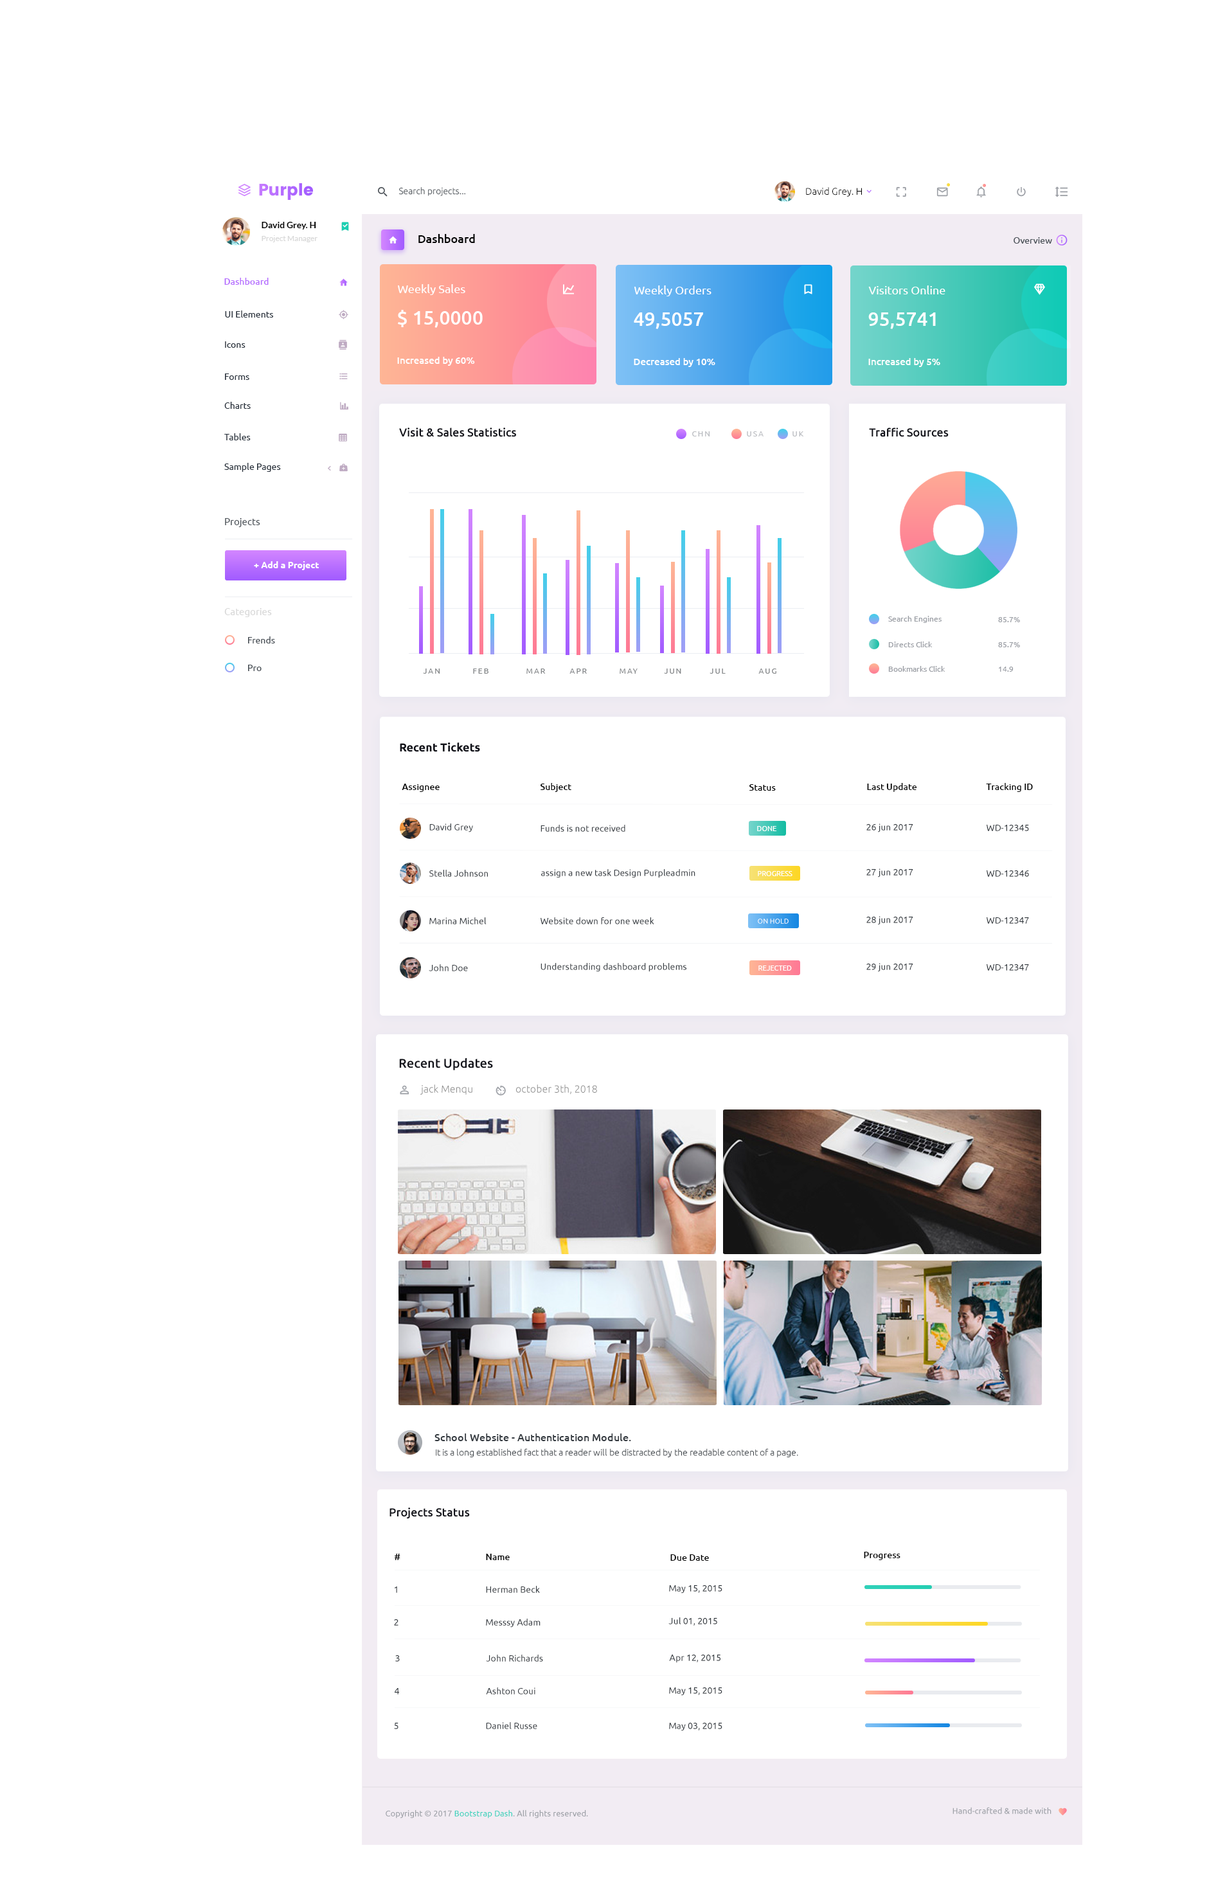
<style>
.page{position:relative;width:1207px;height:1895px;background:#ffffff}
.page>*{position:absolute;margin:0}
.t1{font:9px "Ubuntu-Light";color:#495057}
.t2{font:9.6px "Ubuntu-Light";color:#000000}
.t3{font:9px "Lato-Bold";color:#000000}
.t4{font:11.6px "Ubuntu-Medium";color:#000000}
.t5{font:9px "Ubuntu-Regular";color:#495057}
.t6{font:9px "Ubuntu-Medium";color:#b66dff}
.t7{font:11.6px "Ubuntu-Regular";color:#ffffff}
.t8{font:9px "Ubuntu-Regular";color:#29323d}
.t9{font:19.3px "Ubuntu-Medium";color:#ffffff}
.t10{font:9.6px "Ubuntu-Medium";color:#ffffff}
.t11{font:11.6px "Ubuntu-Medium";color:#12131a}
.t12{font:7.7px "Ubuntu-Regular";letter-spacing:0.16em;color:#9c9fa6;text-transform:uppercase}
.t13{font:9.6px "Ubuntu-Regular";color:#495057}
.t14{font:9px "Ubuntu-Bold";color:#ffffff}
.t15{font:7.7px "Ubuntu-Regular";color:#9c9fa6}
.t16{font:11.6px "Ubuntu-Bold";color:#12131a}
.t17{font:9px "Ubuntu-Medium";color:#000000}
.t18{font:9px "Ubuntu-Regular";color:#343a40}
.t19{font:7.1px "Ubuntu-Regular";color:#ffffff;text-transform:uppercase}
.t20{font:12.9px "Ubuntu-Medium";color:#12131a}
.t21{font:10.3px "Ubuntu-Light";color:#9c9fa6}
.t22{font:10.3px "Ubuntu-Medium";color:#343a40}
.t23{font:9px "Ubuntu-Light";color:#343a40}
.t24{font:8.4px "Ubuntu-Regular";color:#9c9fa6}
.t25{font:8.4px "Ubuntu-Regular";color:#32d2bb}
</style>
<div class="page">
<p class="t1" style="left:399px;top:187px;width:67px;height:9px">Search projects...</p>
<p class="t2" style="left:806px;top:187px;width:56px;height:10px">David Grey. H</p>
<p class="t3" style="left:262px;top:222px;width:54px;height:8px">David Grey. H</p>
<p class="t4" style="left:419px;top:234px;width:56px;height:9px">Dashboard</p>
<p class="t5" style="left:1014px;top:237px;width:38px;height:7px">Overview</p>
<p class="t6" style="left:224px;top:278px;width:45px;height:7px">Dashboard</p>
<p class="t7" style="left:398px;top:284px;width:67px;height:11px">Weekly Sales</p>
<p class="t7" style="left:634px;top:285px;width:78px;height:11px">Weekly Orders</p>
<p class="t7" style="left:869px;top:285px;width:77px;height:9px">Visitors Online</p>
<p class="t8" style="left:225px;top:310px;width:48px;height:8px">UI Elements</p>
<p class="t9" style="left:398px;top:310px;width:85px;height:18px">$ 15,0000</p>
<p class="t9" style="left:634px;top:312px;width:69px;height:17px">49,5057</p>
<p class="t9" style="left:869px;top:312px;width:67px;height:17px">95,5741</p>
<p class="t8" style="left:225px;top:341px;width:21px;height:7px">Icons</p>
<p class="t10" style="left:397px;top:357px;width:78px;height:9px">Increased by 60%</p>
<p class="t10" style="left:634px;top:358px;width:82px;height:9px">Decreased by 10%</p>
<p class="t10" style="left:869px;top:358px;width:72px;height:9px">Increased by 5%</p>
<p class="t8" style="left:225px;top:374px;width:24px;height:6px">Forms</p>
<p class="t8" style="left:224px;top:402px;width:27px;height:7px">Charts</p>
<p class="t8" style="left:224px;top:433px;width:27px;height:7px">Tables</p>
<p class="t11" style="left:399px;top:428px;width:117px;height:9px">Visit &amp; Sales Statistics</p>
<p class="t12" style="left:692px;top:431px;width:18px;height:6px;opacity:0.7">CHN</p>
<p class="t12" style="left:747px;top:431px;width:17px;height:6px;opacity:0.7">USA</p>
<p class="t12" style="left:793px;top:431px;width:11px;height:6px;opacity:0.7">UK</p>
<p class="t11" style="left:869px;top:428px;width:80px;height:9px">Traffic Sources</p>
<p class="t8" style="left:224px;top:463px;width:57px;height:9px">Sample Pages</p>
<p class="t13" style="left:225px;top:518px;width:35px;height:9px">Projects</p>
<p class="t14" style="left:254px;top:561px;width:65px;height:9px">+ Add a Project</p>
<p class="t15" style="left:888px;top:616px;width:54px;height:7px">Search Engines</p>
<p class="t15" style="left:998px;top:617px;width:22px;height:5px">85.7%</p>
<p class="t5" style="left:248px;top:636px;width:27px;height:8px">Frends</p>
<p class="t15" style="left:888px;top:642px;width:45px;height:5px">Directs Click</p>
<p class="t15" style="left:998px;top:642px;width:22px;height:5px">85.7%</p>
<p class="t5" style="left:248px;top:665px;width:14px;height:6px">Pro</p>
<p class="t15" style="left:888px;top:666px;width:58px;height:6px">Bookmarks Click</p>
<p class="t15" style="left:999px;top:667px;width:15px;height:5px">14.9</p>
<p class="t16" style="left:400px;top:742px;width:80px;height:10px">Recent Tickets</p>
<p class="t17" style="left:402px;top:784px;width:38px;height:8px">Assignee</p>
<p class="t17" style="left:541px;top:783px;width:31px;height:9px">Subject</p>
<p class="t17" style="left:750px;top:784px;width:26px;height:7px">Status</p>
<p class="t17" style="left:867px;top:783px;width:50px;height:9px">Last Update</p>
<p class="t17" style="left:986px;top:783px;width:47px;height:9px">Tracking ID</p>
<p class="t18" style="left:429px;top:824px;width:44px;height:9px">David Grey</p>
<p class="t18" style="left:541px;top:825px;width:85px;height:7px">Funds is not received</p>
<p class="t19" style="left:757px;top:826px;width:20px;height:5px">Done</p>
<p class="t18" style="left:867px;top:824px;width:47px;height:9px">26 jun 2017</p>
<p class="t18" style="left:987px;top:825px;width:42px;height:6px">WD-12345</p>
<p class="t18" style="left:429px;top:870px;width:59px;height:7px">Stella Johnson</p>
<p class="t18" style="left:541px;top:869px;width:155px;height:9px">assign a new task Design Purpleadmin</p>
<p class="t18" style="left:867px;top:869px;width:47px;height:9px">27 jun 2017</p>
<p class="t19" style="left:758px;top:871px;width:35px;height:5px">Progress</p>
<p class="t18" style="left:987px;top:870px;width:42px;height:7px">WD-12346</p>
<p class="t18" style="left:429px;top:917px;width:58px;height:7px">Marina Michel</p>
<p class="t18" style="left:541px;top:917px;width:113px;height:7px">Website down for one week</p>
<p class="t18" style="left:867px;top:916px;width:47px;height:9px">28 jun 2017</p>
<p class="t18" style="left:987px;top:917px;width:42px;height:7px">WD-12347</p>
<p class="t19" style="left:758px;top:919px;width:31px;height:5px">On Hold</p>
<p class="t18" style="left:429px;top:964px;width:39px;height:7px">John Doe</p>
<p class="t18" style="left:541px;top:963px;width:146px;height:9px">Understanding dashboard problems</p>
<p class="t19" style="left:759px;top:966px;width:33px;height:5px">Rejected</p>
<p class="t18" style="left:867px;top:963px;width:47px;height:9px">29 jun 2017</p>
<p class="t18" style="left:987px;top:964px;width:42px;height:7px">WD-12347</p>
<p class="t20" style="left:399px;top:1058px;width:94px;height:12px">Recent Updates</p>
<p class="t21" style="left:420px;top:1084px;width:53px;height:11px">jack Menqu</p>
<p class="t21" style="left:516px;top:1084px;width:81px;height:11px">october 3th, 2018</p>
<p class="t22" style="left:435px;top:1434px;width:196px;height:7px">School Website - Authentication Module.</p>
<p class="t23" style="left:436px;top:1448px;width:362px;height:9px">It is a long established fact that a reader will be distracted by the readable content of a page.</p>
<p class="t11" style="left:390px;top:1508px;width:80px;height:11px">Projects Status</p>
<p class="t17" style="left:395px;top:1554px;width:6px;height:6px">#</p>
<p class="t17" style="left:486px;top:1554px;width:24px;height:6px">Name</p>
<p class="t17" style="left:864px;top:1552px;width:37px;height:8px">Progress</p>
<p class="t17" style="left:670px;top:1554px;width:39px;height:7px">Due Date</p>
<p class="t18" style="left:395px;top:1587px;width:2px;height:6px">1</p>
<p class="t18" style="left:486px;top:1586px;width:54px;height:7px">Herman Beck</p>
<p class="t18" style="left:669px;top:1585px;width:54px;height:9px">May 15, 2015</p>
<p class="t18" style="left:394px;top:1619px;width:5px;height:7px">2</p>
<p class="t18" style="left:486px;top:1619px;width:55px;height:9px">Messsy Adam</p>
<p class="t18" style="left:669px;top:1617px;width:48px;height:9px">Jul 01, 2015</p>
<p class="t18" style="left:395px;top:1655px;width:5px;height:7px">3</p>
<p class="t18" style="left:486px;top:1655px;width:57px;height:7px">John Richards</p>
<p class="t18" style="left:669px;top:1655px;width:52px;height:8px">Apr 12, 2015</p>
<p class="t18" style="left:395px;top:1688px;width:4px;height:7px">4</p>
<p class="t18" style="left:486px;top:1688px;width:50px;height:7px">Ashton Coui</p>
<p class="t18" style="left:669px;top:1688px;width:54px;height:8px">May 15, 2015</p>
<p class="t18" style="left:394px;top:1723px;width:5px;height:6px">5</p>
<p class="t18" style="left:486px;top:1722px;width:51px;height:7px">Daniel Russe</p>
<p class="t18" style="left:669px;top:1723px;width:54px;height:8px">May 03, 2015</p>
<p class="t24" style="left:386px;top:1810px;width:202px;height:9px">Copyright © 2017 <span class="t25">Bootstrap Dash</span>. All rights reserved.</p>
<p class="t24" style="left:953px;top:1807px;width:99px;height:7px">Hand-crafted &amp; made with</p>
</div>
